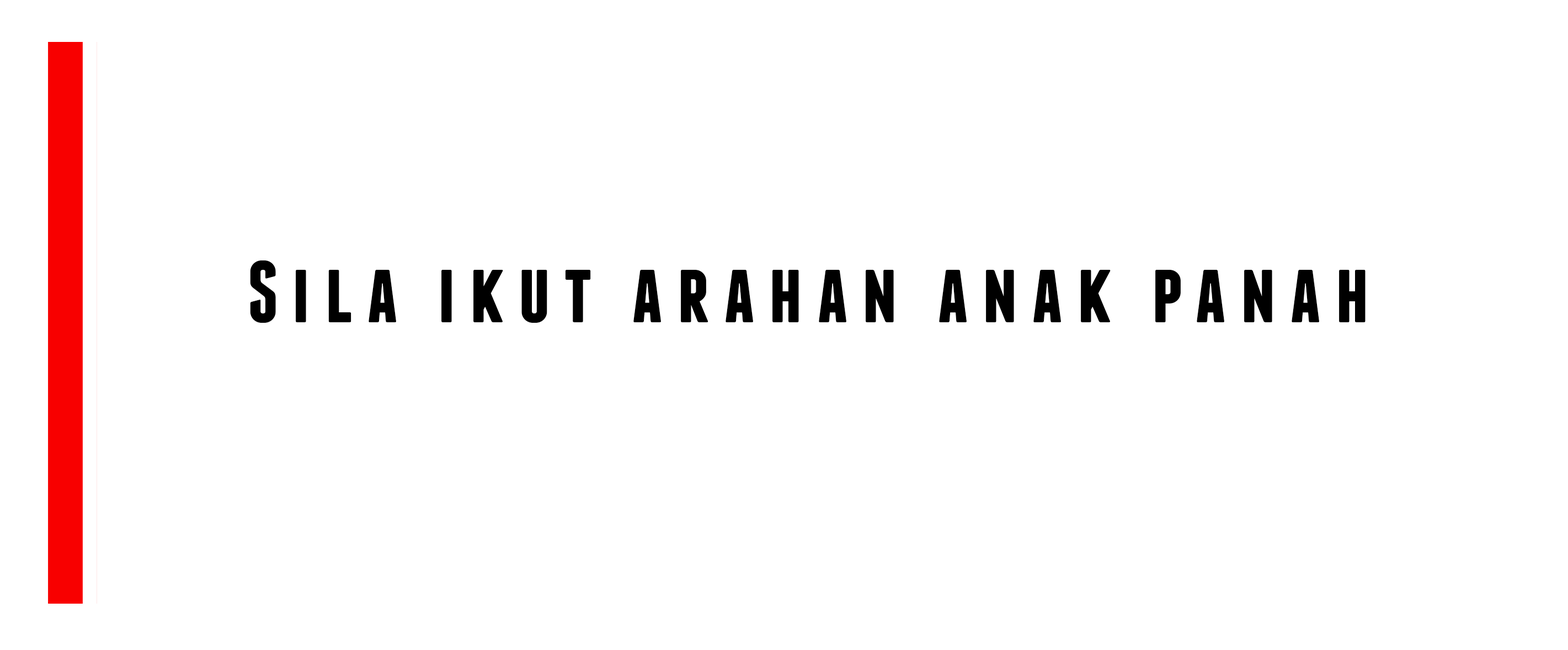
<style>
.page{position:relative;width:1568px;height:650px;background:#ffffff}
.page>*{position:absolute;margin:0}
.t1{font:87.3px "Franchise-Bold";letter-spacing:0.16em;color:#000000}
</style>
<div class="page">
<p class="t1" style="left:250px;top:260px;width:1116px;height:63px">Sila ikut arahan anak panah</p>
</div>
